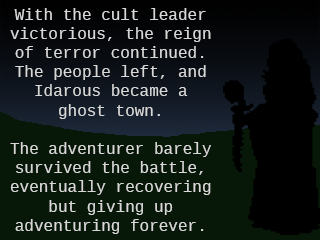
<style>
.page{position:relative;width:320px;height:240px;background:#081808}
.page>*{position:absolute;margin:0}
.t1{font:16px "LiberationMono";color:#d8d8d8}
</style>
<div class="page">
<p class="t1" style="left:10px;top:8px;width:201px;height:226px;text-align:center">With the cult leader victorious, the reign of terror continued. The people left, and Idarous became a ghost town.<br><br>The adventurer barely survived the battle, eventually recovering but giving up adventuring forever.</p>
</div>
